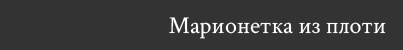
<style>
.page{position:relative;width:403px;height:50px;background:#333333}
.page>*{position:absolute;margin:0}
.t1{font:24px "CrimsonText-Regular";color:#ffffff}
</style>
<div class="page">
<p class="t1" style="left:169px;top:17px;width:217px;height:22px">Марионетка из плоти</p>
</div>
